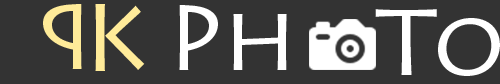
<style>
.page{position:relative;width:500px;height:84px;background:#333333}
.page>*{position:absolute;margin:0}
.t1{font:93.7px "LithosPro-Regular";color:#ffeb99}
.t2{font:93.7px "LithosPro-Regular";color:#ffffff}
</style>
<div class="page">
<p class="t1" style="left:43px;top:4px;width:39px;height:65px;rotate:180deg">P</p>
<p class="t1" style="left:95px;top:4px;width:50px;height:67px">K</p>
<p class="t2" style="left:179px;top:5px;width:108px;height:65px">Ph</p>
<p class="t2" style="left:375px;top:9px;width:125px;height:67px">To</p>
</div>
